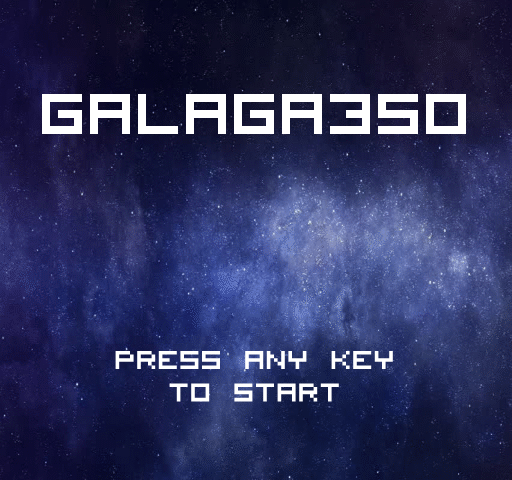
<style>
.page{position:relative;width:512px;height:480px}
.page>*{position:absolute;margin:0}
.t1{font:80px "VisitorTT1BRK";color:#ffffff}
.t2{font:36px "VisitorTT1BRK";color:#ffffff}
</style>
<div class="page">
<p class="t1" style="left:42px;top:94px;width:424px;height:40px">GALAGA350</p>
<p class="t2" style="left:115px;top:351px;width:278px;height:51px;text-align:center">PRESS ANY KEY<br>TO START</p>
</div>
